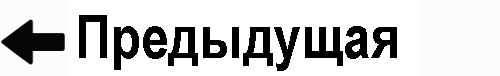
<style>
.page{position:relative;width:500px;height:76px;background:#ffffff}
.page>*{position:absolute;margin:0}
.t1{font:60px "ArialNarrow-Bold";color:#000000}
</style>
<div class="page">
<p class="t1" style="left:79px;top:15px;width:318px;height:56px">Предыдущая</p>
</div>
